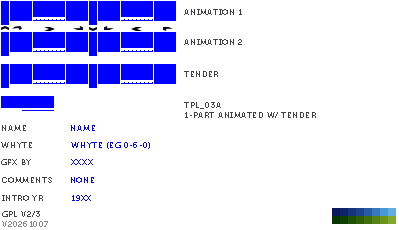
<style>
.page{position:relative;width:400px;height:230px;background:#ffffff}
.page>*{position:absolute;margin:0}
.t1{font:8px "Museo700-Regular";letter-spacing:0.075em;color:#404040;text-transform:uppercase}
.t2{font:8px "Museo700-Regular";letter-spacing:0.075em;color:#0000ff;text-transform:uppercase}
.t3{font:8px "Museo700-Regular";letter-spacing:0.075em;color:#848484;text-transform:uppercase}
</style>
<div class="page">
<p class="t1" style="left:184px;top:9px;width:58px;height:6px">animation 1</p>
<p class="t1" style="left:184px;top:39px;width:58px;height:6px">animation 2</p>
<p class="t1" style="left:184px;top:71px;width:34px;height:6px">tender</p>
<p class="t1" style="left:184px;top:102px;width:132px;height:16px">tpl_03a<br>1-part animated w/ tender</p>
<p class="t1" style="left:2px;top:125px;width:24px;height:6px">name</p>
<p class="t2" style="left:71px;top:125px;width:24px;height:6px">name</p>
<p class="t1" style="left:1px;top:142px;width:31px;height:6px">whyte</p>
<p class="t2" style="left:71px;top:142px;width:79px;height:7px">whyte (eg 0-6-0)</p>
<p class="t1" style="left:1px;top:159px;width:30px;height:6px">gfx by</p>
<p class="t2" style="left:71px;top:159px;width:22px;height:6px">xxxx</p>
<p class="t1" style="left:2px;top:177px;width:50px;height:6px">comments</p>
<p class="t2" style="left:71px;top:177px;width:23px;height:6px">none</p>
<p class="t1" style="left:2px;top:195px;width:41px;height:6px">intro yr</p>
<p class="t2" style="left:72px;top:195px;width:19px;height:6px">19xx</p>
<p class="t3" style="left:2px;top:221px;width:46px;height:6px">v20261007</p>
<p class="t1" style="left:2px;top:211px;width:38px;height:6px">gpl v2/3</p>
</div>
